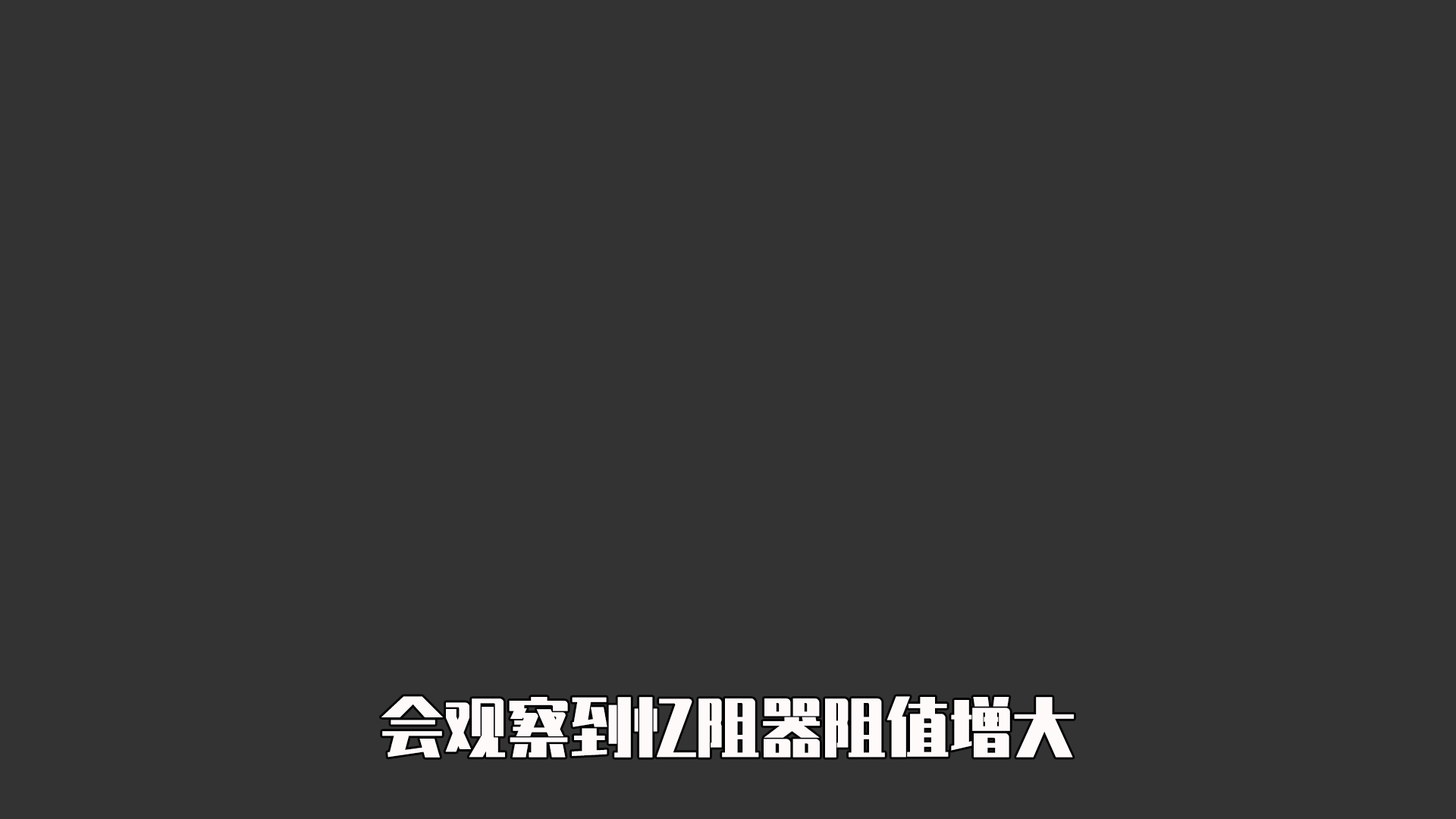
<style>
.page{position:relative;width:1456px;height:819px;background:#333333}
.page>*{position:absolute;margin:0}
.t1{font:63.2px "ZhenyanGB-Regular";color:#fefafa}
</style>
<div class="page">
<p class="t1" style="left:381px;top:696px;width:693px;height:62px">会观察到忆阻器阻值增大</p>
</div>
